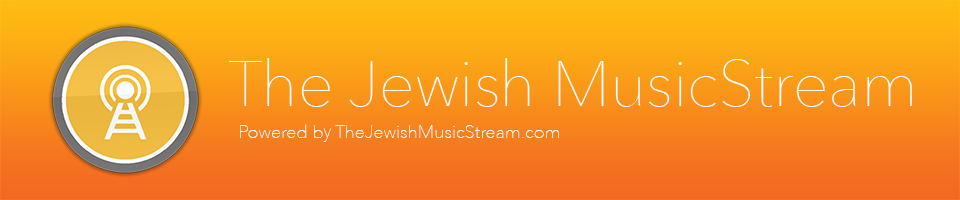
<style>
.page{position:relative;width:960px;height:200px}
.page>*{position:absolute;margin:0}
.t1{font:64px "AvenirNext-UltraLight";color:#ffffff}
.t2{font:18px "AvenirNext-UltraLight";color:#ffffff}
</style>
<div class="page">
<p class="t1" style="left:229px;top:58px;width:683px;height:49px">The Jewish MusicStream</p>
<p class="t2" style="left:240px;top:124px;width:319px;height:18px">Powered by TheJewishMusicStream.com</p>
</div>
